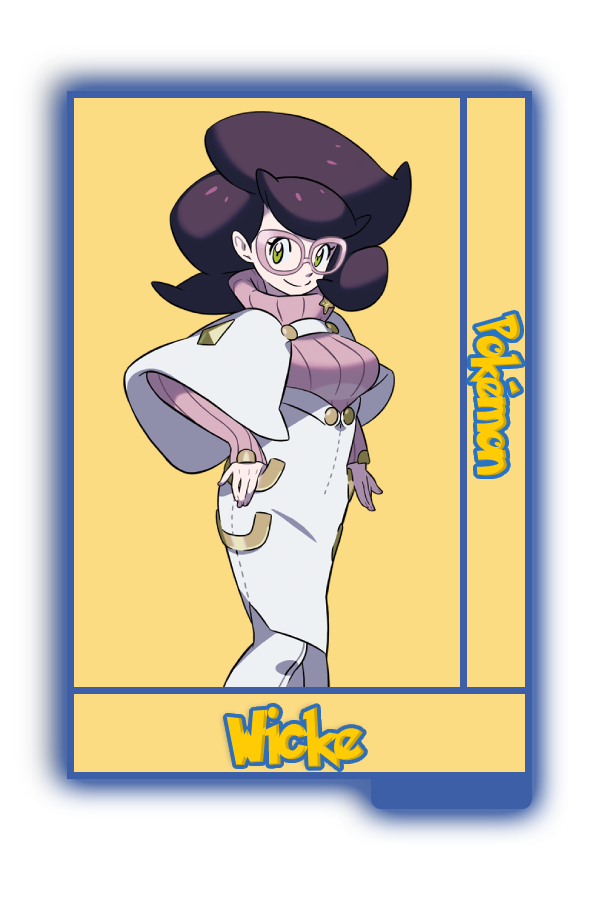
<style>
.page{position:relative;width:600px;height:900px;background:#fbdc83}
.page>*{position:absolute;margin:0}
.t1{font:48.8px "PokemonSolidNormal";color:#ffcb05;scale:0.8 1}
.t2{font:56.6px "PokemonSolidNormal";color:#ffcb05;scale:0.92 1}
</style>
<div class="page">
<p class="t1" style="left:469px;top:313px;width:54px;height:163px;rotate:90deg">Pokémon</p>
<p class="t2" style="left:226px;top:706px;width:139px;height:63px">Wicke</p>
</div>
